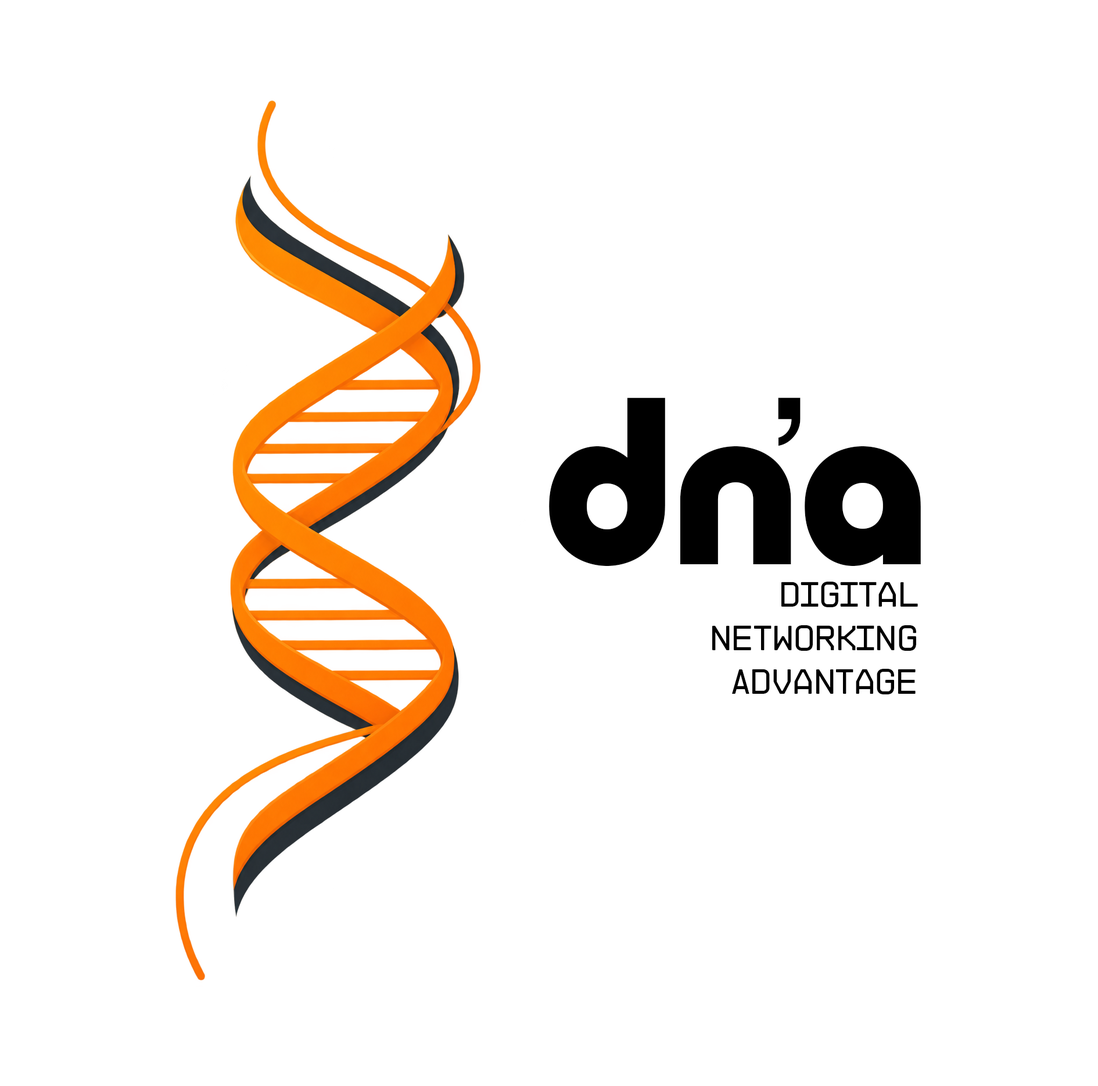
<style>
.page{position:relative;width:1098px;height:1086px;background:#ffffff}
.page>*{position:absolute;margin:0}
.t1{font:213px "MingaBold";color:#000000}
.t2{font:213px "AppleSDGothicNeoM00";color:#000000}
.t3{font:33.9px/43.6px "MONTECHV02-Regular";color:#000000}
</style>
<div class="page">
<p class="t1" style="left:549px;top:397px;width:372px;height:169px">dna</p>
<p class="t2" style="left:778px;top:397px;width:23px;height:49px">’</p>
<p class="t3" style="left:712px;top:582px;width:206px;height:112px;text-align:right">Digital<br> Networking<br> Advantage</p>
</div>
